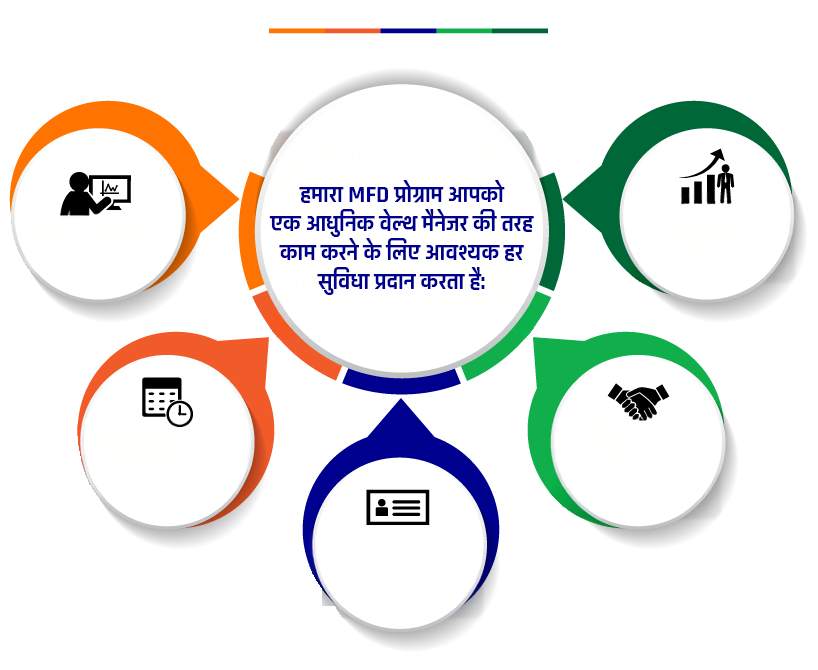
<style>
.page{position:relative;width:818px;height:670px;background:#ffffff}
.page>*{position:absolute;margin:0}
.t1{font:24px "Rajdhani-Bold";color:#00008e;text-transform:uppercase}
</style>
<div class="page">
<p class="t1" style="left:269px;top:180px;width:265px;height:115px;text-align:center">हमारा MFD प्रोग्राम आपको<br>एक आधुनिक वेल्थ मैनेजर की तरह<br>काम करने के लिए आवश्यक हर<br>सुविधा प्रदान करता है:</p>
</div>
